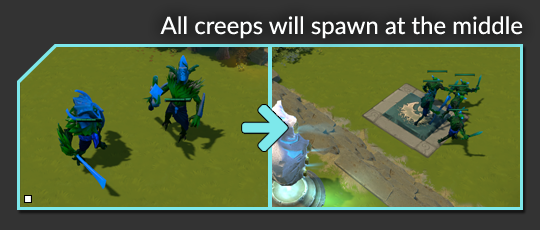
<style>
.page{position:relative;width:540px;height:230px}
.page>*{position:absolute;margin:0}
.t1{font:24px "Lato-Regular";color:#feffff}
</style>
<div class="page">
<p class="t1" style="left:160px;top:16px;width:363px;height:23px">All creeps will spawn at the middle</p>
</div>
